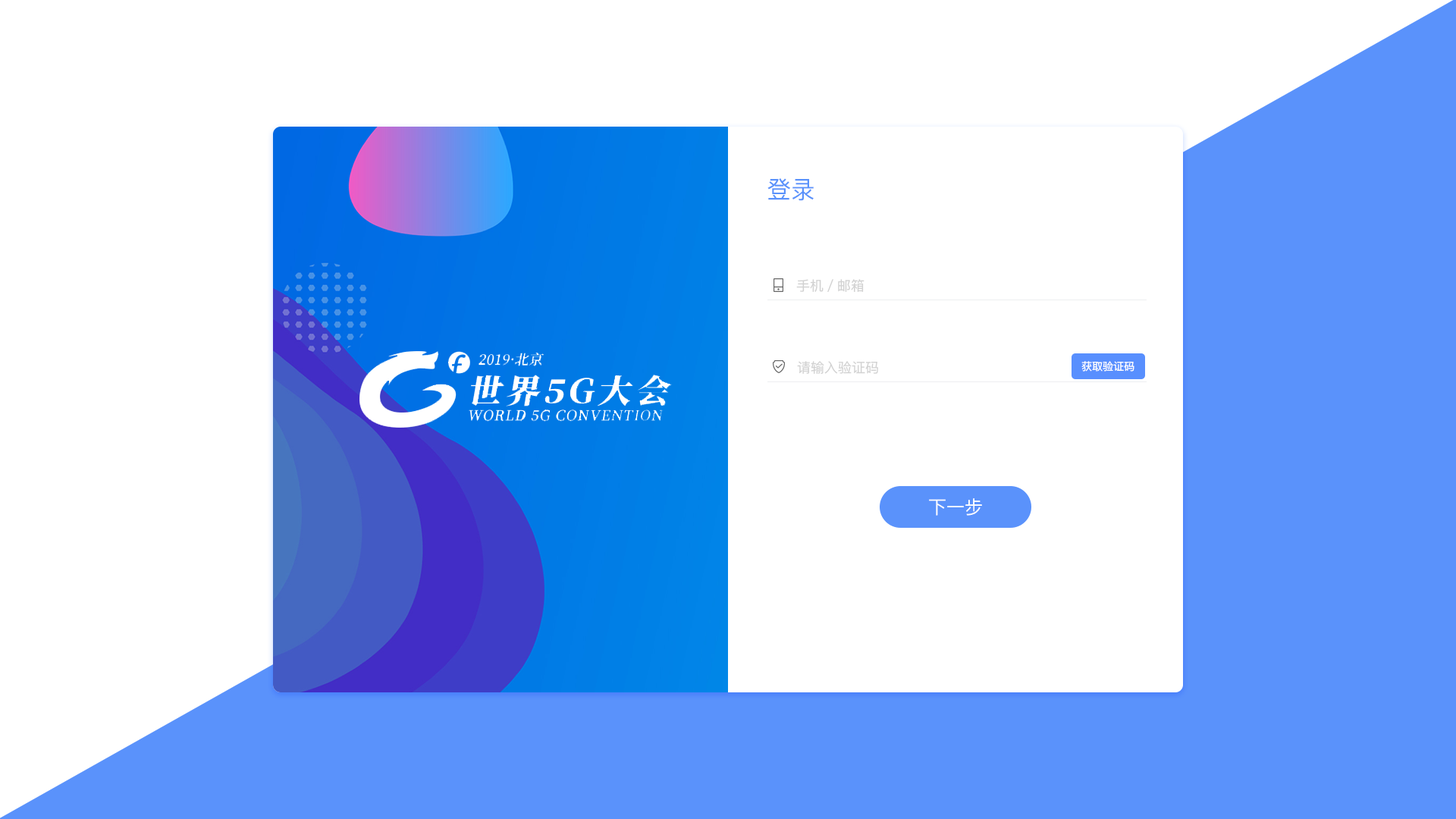
<style>
.page{position:relative;width:1456px;height:819px;background:#ffffff}
.page>*{position:absolute;margin:0}
.t1{font:24.3px "PingFangSC-Regular";color:#5a92fb}
.t2{font:13.5px "PingFangSC-Regular";color:#d2d2d2}
.t3{font:10.6px "PingFangSC-Regular";color:#ffffff}
.t4{font:18.2px "PingFangSC-Regular";color:#ffffff}
</style>
<div class="page">
<p class="t1" style="left:767px;top:178px;width:47px;height:23px">登录</p>
<p class="t2" style="left:796px;top:279px;width:68px;height:13px">手机／邮箱</p>
<p class="t2" style="left:797px;top:361px;width:81px;height:13px">请输入验证码</p>
<p class="t3" style="left:1081px;top:361px;width:53px;height:11px">获取验证码</p>
<p class="t4" style="left:929px;top:498px;width:53px;height:18px">下一步</p>
</div>
